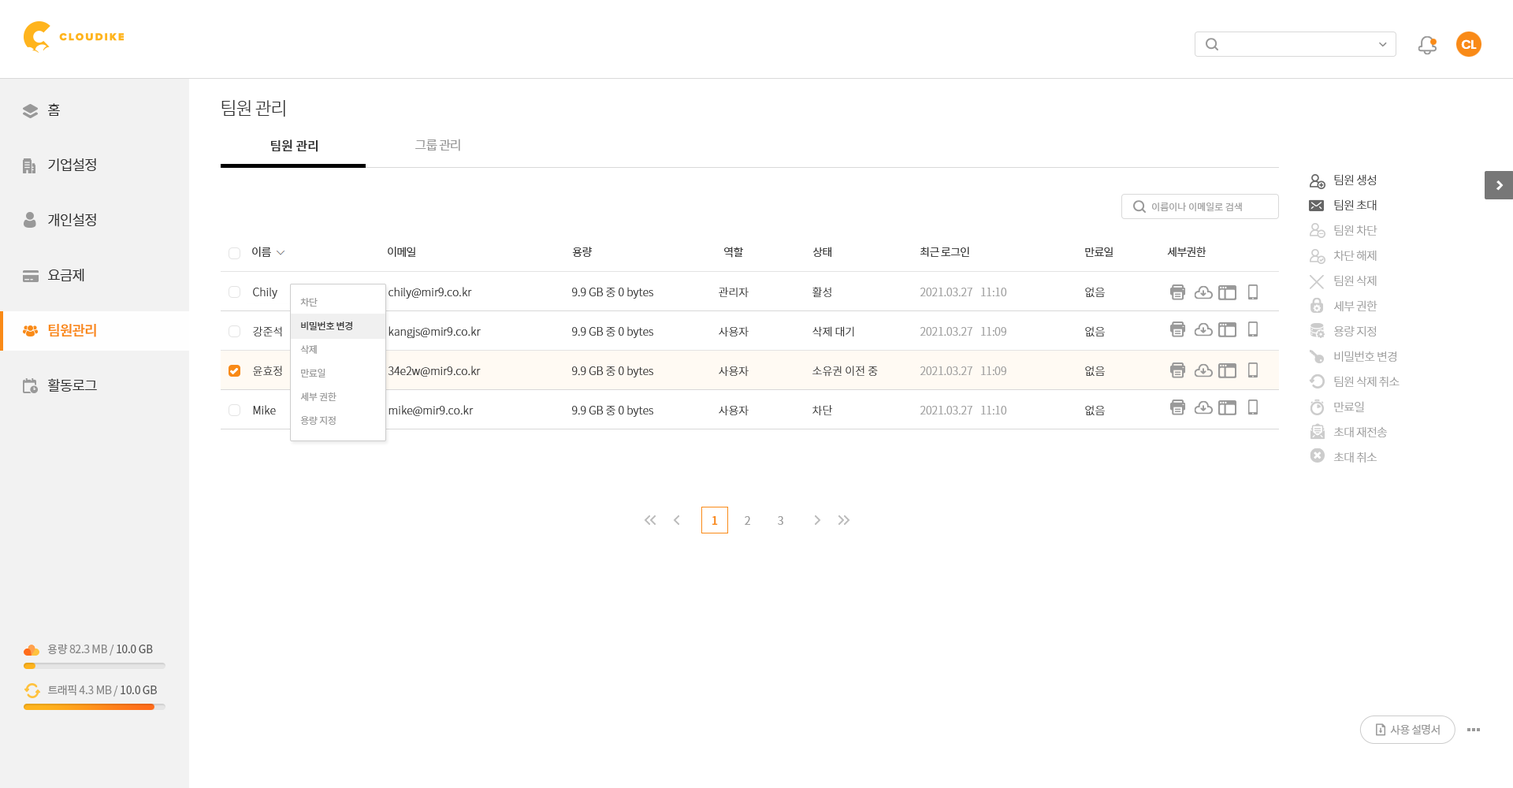
<style>
.page{position:relative;width:1513px;height:788px;background:#ffffff}
.page>*{position:absolute;margin:0}
.t1{font:12.6px "Poppins-SemiBold";letter-spacing:-0.05em;color:#ffffff}
.t2{font:18.1px "NotoSansCJKkr-Light";letter-spacing:-0.05em;color:#333333}
.t3{font:14.2px/55.2px "NotoSansCJKkr-DemiLight";letter-spacing:-0.05em;color:#333333}
.t4{font:14.2px/55.2px "NotoSansCJKkr-Medium";letter-spacing:-0.05em;color:#f98a17}
.t5{font:12.6px "NotoSansCJKkr-Medium";color:#333333}
.t6{font:12.6px "NotoSansCJKkr-DemiLight";letter-spacing:-0.05em;color:#999999}
.t7{font:11.8px/25.2px "NotoSansCJKkr-Light";letter-spacing:-0.05em;color:#999999}
.t8{font:11.8px/25.2px "NotoSansCJKkr-Light";letter-spacing:-0.05em;color:#333333}
.t9{font:9.5px "NotoSansCJKkr-DemiLight";color:#a1a1a1}
.t10{font:11px "NotoSansCJKkr-DemiLight";letter-spacing:-0.05em;color:#333333}
.t11{font:11px/39.4px "NotoSansCJKkr-Light";color:#333333}
.t12{font:11px/39.4px "NotoSansCJKkr-Light";color:#999999}
.t13{font:9.5px/23.6px "NotoSansCJKkr-DemiLight";letter-spacing:-0.025em;color:#999999}
.t14{font:9.5px/23.6px "NotoSansCJKkr-DemiLight";letter-spacing:-0.025em;color:#333333}
.t15{font:11px "NotoSansCJKkr-Medium";color:#f98a17}
.t16{font:11px "NotoSansCJKkr-DemiLight";color:#999999}
.t17{font:11px "NotoSansCJKkr-Regular";letter-spacing:-0.025em;color:#888888}
.t18{font:11px "NotoSansCJKkr-Regular";letter-spacing:-0.025em;color:#585858}
.t19{font:11px "NotoSansCJKkr-Regular";letter-spacing:-0.05em;color:#999999}
</style>
<div class="page">
<p class="t1" style="left:1461px;top:39px;width:16px;height:10px">CL</p>
<p class="t2" style="left:221px;top:99px;width:64px;height:18px">팀원 관리</p>
<p class="t3" style="left:48px;top:103px;width:49px;height:289px">홈<br>기업설정<br>개인설정<br>요금제<br><span class="t4">팀원관리<br></span>활동로그</p>
<p class="t5" style="left:271px;top:139px;width:47px;height:13px">팀원 관리</p>
<p class="t6" style="left:415px;top:139px;width:45px;height:12px">그룹 관리</p>
<p class="t7" style="left:1333px;top:174px;width:67px;height:289px"><span class="t8">팀원 생성<br>팀원 초대<br></span>팀원 차단<br>차단 해제<br>팀원 삭제<br>세부 권한<br>용량 지정<br>비밀번호 변경<br>팀원 삭제 취소<br>만료일<br>초대 재전송<br>초대 취소</p>
<p class="t9" style="left:1152px;top:202px;width:90px;height:10px">이름이나 이메일로 검색</p>
<p class="t10" style="left:252px;top:247px;width:19px;height:10px">이름</p>
<p class="t10" style="left:388px;top:247px;width:28px;height:11px">이메일</p>
<p class="t10" style="left:572px;top:247px;width:20px;height:10px">용량</p>
<p class="t10" style="left:724px;top:247px;width:19px;height:11px">역할</p>
<p class="t10" style="left:813px;top:247px;width:18px;height:10px">상태</p>
<p class="t10" style="left:920px;top:247px;width:49px;height:10px">최근 로그인</p>
<p class="t10" style="left:1085px;top:247px;width:29px;height:10px">만료일</p>
<p class="t10" style="left:1167px;top:247px;width:39px;height:10px">세부권한</p>
<p class="t11" style="left:253px;top:287px;width:29px;height:128px">Chily<br>강준석<br>윤효정<br>Mike</p>
<p class="t11" style="left:388px;top:287px;width:93px;height:129px">chily@mir9.co.kr<br>kangjs@mir9.co.kr<br>34e2w@mir9.co.kr<br>mike@mir9.co.kr</p>
<p class="t11" style="left:572px;top:287px;width:81px;height:130px">9.9 GB 중 0 bytes<br>9.9 GB 중 0 bytes<br>9.9 GB 중 0 bytes<br>9.9 GB 중 0 bytes</p>
<p class="t11" style="left:719px;top:287px;width:30px;height:129px">관리자<br>사용자<br>사용자<br>사용자</p>
<p class="t11" style="left:813px;top:287px;width:65px;height:129px">활성<br>삭제 대기<br>소유권 이전 중<br>차단</p>
<p class="t12" style="left:920px;top:288px;width:87px;height:127px">2021.03.27   11:10<br>2021.03.27   11:09<br>2021.03.27   11:09<br>2021.03.27   11:10</p>
<p class="t11" style="left:1085px;top:287px;width:20px;height:128px">없음<br>없음<br>없음<br>없음</p>
<p class="t13" style="left:300px;top:298px;width:52px;height:127px">차단<br><span class="t14">비밀번호 변경<br></span>삭제<br>만료일<br>세부 권한<br>용량 지정</p>
<p class="t15" style="left:712px;top:516px;width:6px;height:9px">1</p>
<p class="t16" style="left:745px;top:516px;width:5px;height:9px">2</p>
<p class="t16" style="left:778px;top:516px;width:5px;height:9px">3</p>
<p class="t17" style="left:47px;top:644px;width:106px;height:12px">용량 82.3 MB / <span class="t18">10.0 GB</span></p>
<p class="t17" style="left:48px;top:685px;width:109px;height:12px">트래픽 4.3 MB / <span class="t18">10.0 GB</span></p>
<p class="t19" style="left:1390px;top:724px;width:50px;height:11px">사용 설명서</p>
</div>
